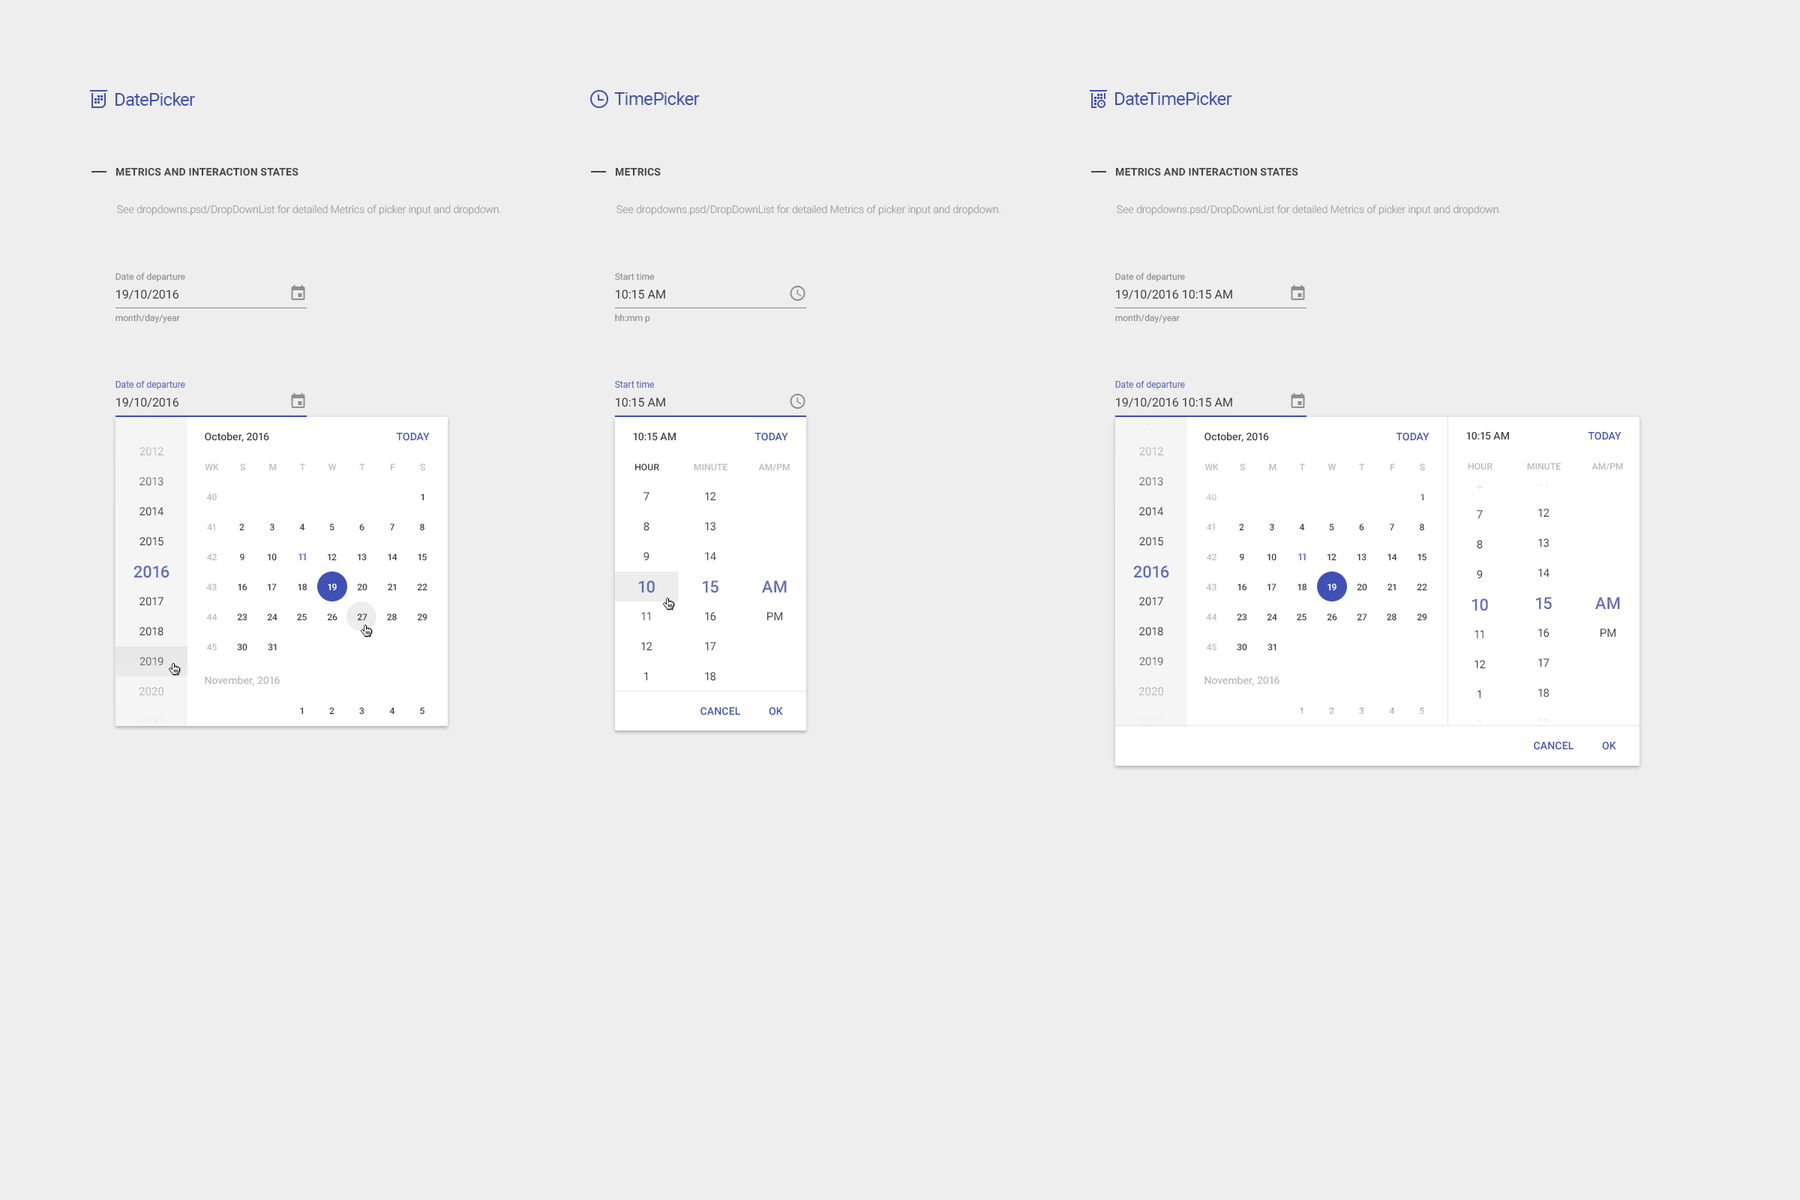
<style>
.page{position:relative;width:1800px;height:1200px;background:#eeeeee}
.page>*{position:absolute;margin:0}
.t1{font:18px "Roboto-Regular";letter-spacing:-0.025em;color:#3f51b5}
.t2{font:10.5px "Roboto-Bold";letter-spacing:0.01em;color:#454545;text-transform:uppercase}
.t3{font:10.5px "Roboto-Light";color:#a1a1a1}
.t4{font:9px "Roboto-Regular";color:#8f8f8f}
.t5{font:12px "Roboto-Regular";color:#3b3b3b}
.t6{font:9px "Roboto-Regular";color:#606cbd}
.t7{font:11.2px/30px "Roboto-Regular";letter-spacing:0.01em}
.t8{font:16.5px/32.2px "Roboto-Medium";letter-spacing:0.01em}
.t9{font:11.2px/27.8px "Roboto-Regular";letter-spacing:0.01em}
.t10{font:10.5px "Roboto-Medium";color:#404040}
.t11{font:10.5px "Roboto-Medium";letter-spacing:0.01em;color:#3f51b5}
.t12{font:9px "Roboto-Medium";color:#bbbbbb}
.t13{font:9px "Roboto-Medium";letter-spacing:0.01em;color:#bbbbbb}
.t14{font:9px "Roboto-Medium";letter-spacing:0.01em}
.t15{font:9px "Roboto-Medium";letter-spacing:0.01em;color:#404040}
.t16{font:9px/30px "Roboto-Medium";color:#bbbbbb}
.t17{font:9px "Roboto-Medium";color:#404040}
.t18{font:9px "Roboto-Medium"}
.t19{font:9px "Roboto-Medium";color:#3f51b5}
.t20{font:16.5px/32.2px "Roboto-Medium";letter-spacing:0.01em;color:#6370c0}
.t21{font:11.2px/27.8px "Roboto-Regular";letter-spacing:0.01em;color:#6370c0}
.t22{font:9px "Roboto-Medium";color:#ffffff}
.t23{font:9px "Roboto-Medium";color:#3b3b3b}
.t24{font:10.5px "Roboto-Medium";color:#bbbbbb}
.t25{font:10.5px "Roboto-Medium";letter-spacing:0.01em;color:#3f51b5;text-transform:uppercase}
.t26{font:9px "Roboto-Medium";color:#aeaeae}
.t27{font:9px "Roboto-Medium";color:#c2c2c2}
.t28{font:9px "Roboto-Medium";color:#bababa}
.t29{font:9px "Roboto-Medium";color:#b8b8b8}
</style>
<div class="page">
<p class="t1" style="left:116px;top:92px;width:79px;height:14px">DatePicker</p>
<p class="t1" style="left:614px;top:92px;width:86px;height:13px">TimePicker</p>
<p class="t1" style="left:1115px;top:92px;width:117px;height:13px">DateTimePicker</p>
<p class="t2" style="left:116px;top:167px;width:182px;height:9px">Metrics and Interaction States</p>
<p class="t2" style="left:615px;top:167px;width:46px;height:9px">Metrics</p>
<p class="t2" style="left:1115px;top:167px;width:183px;height:9px">Metrics and Interaction States</p>
<p class="t3" style="left:117px;top:205px;width:384px;height:10px">See dropdowns.psd/DropDownList for detailed Metrics of picker input and dropdown.</p>
<p class="t3" style="left:616px;top:205px;width:384px;height:10px">See dropdowns.psd/DropDownList for detailed Metrics of picker input and dropdown.</p>
<p class="t3" style="left:1117px;top:205px;width:384px;height:10px">See dropdowns.psd/DropDownList for detailed Metrics of picker input and dropdown.</p>
<p class="t4" style="left:116px;top:272px;width:69px;height:10px">Date of departure</p>
<p class="t4" style="left:615px;top:273px;width:40px;height:7px">Start time</p>
<p class="t4" style="left:1115px;top:272px;width:70px;height:10px">Date of departure</p>
<p class="t5" style="left:116px;top:290px;width:63px;height:10px">19/10/2016</p>
<p class="t5" style="left:615px;top:290px;width:50px;height:9px">10:15 АМ</p>
<p class="t5" style="left:1115px;top:290px;width:117px;height:10px">19/10/2016 10:15 АМ</p>
<p class="t4" style="left:116px;top:314px;width:64px;height:9px">month/day/year</p>
<p class="t4" style="left:615px;top:314px;width:35px;height:9px">hh:mm p</p>
<p class="t4" style="left:1115px;top:314px;width:65px;height:9px">month/day/year</p>
<p class="t6" style="left:116px;top:381px;width:69px;height:8px">Date of departure</p>
<p class="t6" style="left:615px;top:381px;width:39px;height:7px">Start time</p>
<p class="t6" style="left:1115px;top:381px;width:70px;height:8px">Date of departure</p>
<p class="t5" style="left:116px;top:398px;width:63px;height:10px">19/10/2016</p>
<p class="t5" style="left:615px;top:398px;width:50px;height:9px">10:15 АМ</p>
<p class="t5" style="left:1115px;top:398px;width:117px;height:10px">19/10/2016 10:15 АМ</p>
<p class="t7" style="left:134px;top:417px;width:36px;height:309px;text-align:center">2011<br>2012<br>2013<br>2014<br>2015<br><span class="t8">2016<br></span><span class="t9">2017<br></span>2018<br>2019<br>2020<br>2021</p>
<p class="t7" style="left:1133px;top:417px;width:36px;height:309px;text-align:center">2011<br>2012<br>2013<br>2014<br>2015<br><span class="t8">2016<br></span><span class="t9">2017<br></span>2018<br>2019<br>2020<br>2021</p>
<p class="t10" style="left:205px;top:432px;width:64px;height:10px">October, 2016</p>
<p class="t11" style="left:396px;top:433px;width:34px;height:8px">TODAY</p>
<p class="t10" style="left:633px;top:433px;width:43px;height:8px">10:15 AM</p>
<p class="t11" style="left:754px;top:433px;width:34px;height:8px">TODAY</p>
<p class="t10" style="left:1204px;top:432px;width:65px;height:10px">October, 2016</p>
<p class="t11" style="left:1396px;top:433px;width:34px;height:8px">TODAY</p>
<p class="t10" style="left:1466px;top:432px;width:43px;height:8px">10:15 AM</p>
<p class="t11" style="left:1588px;top:432px;width:34px;height:8px">TODAY</p>
<p class="t12" style="left:205px;top:464px;width:14px;height:6px">WK</p>
<p class="t13" style="left:240px;top:464px;width:5px;height:7px">S</p>
<p class="t13" style="left:269px;top:464px;width:8px;height:7px">M</p>
<p class="t13" style="left:300px;top:464px;width:5px;height:7px">T</p>
<p class="t13" style="left:328px;top:464px;width:8px;height:7px">W</p>
<p class="t14" style="left:359px;top:464px;width:6px;height:6px">T</p>
<p class="t13" style="left:390px;top:464px;width:5px;height:7px">F</p>
<p class="t13" style="left:420px;top:464px;width:5px;height:7px">S</p>
<p class="t15" style="left:634px;top:464px;width:25px;height:7px">HOUR</p>
<p class="t13" style="left:694px;top:464px;width:34px;height:7px">MINUTE</p>
<p class="t13" style="left:758px;top:464px;width:32px;height:7px">AM/PM</p>
<p class="t12" style="left:1204px;top:464px;width:15px;height:6px">WK</p>
<p class="t13" style="left:1240px;top:464px;width:5px;height:7px">S</p>
<p class="t13" style="left:1269px;top:464px;width:7px;height:7px">M</p>
<p class="t13" style="left:1300px;top:464px;width:5px;height:7px">T</p>
<p class="t13" style="left:1328px;top:464px;width:8px;height:7px">W</p>
<p class="t14" style="left:1359px;top:464px;width:6px;height:6px">T</p>
<p class="t13" style="left:1390px;top:464px;width:5px;height:7px">F</p>
<p class="t13" style="left:1420px;top:464px;width:5px;height:7px">S</p>
<p class="t13" style="left:1468px;top:463px;width:24px;height:7px">HOUR</p>
<p class="t13" style="left:1527px;top:463px;width:34px;height:7px">MINUTE</p>
<p class="t13" style="left:1592px;top:463px;width:31px;height:7px">AM/PM</p>
<p class="t7" style="left:1472px;top:480px;width:16px;height:248px;text-align:center">6<br>7<br>8<br>9<br><span class="t8">10<br></span><span class="t9">11<br></span>12<br>1<br>2</p>
<p class="t7" style="left:1536px;top:478px;width:16px;height:249px;text-align:center">11<br>12<br>13<br>14<br><span class="t8">15<br></span><span class="t9">16<br></span>17<br>18<br>19</p>
<p class="t16" style="left:206px;top:494px;width:12px;height:156px;text-align:center">40<br>41<br>42<br>43<br>44<br>45</p>
<p class="t17" style="left:421px;top:494px;width:3px;height:7px">1</p>
<p class="t7" style="left:638px;top:492px;width:17px;height:188px;text-align:center">7<br>8<br>9<br><span class="t8">10<br></span><span class="t9">11<br></span>12<br>1</p>
<p class="t7" style="left:703px;top:492px;width:15px;height:189px;text-align:center">12<br>13<br>14<br><span class="t8">15<br></span><span class="t9">16<br></span>17<br>18</p>
<p class="t16" style="left:1206px;top:494px;width:11px;height:156px;text-align:center">40<br>41<br>42<br>43<br>44<br>45</p>
<p class="t18" style="left:1420px;top:494px;width:4px;height:7px">1</p>
<p class="t17" style="left:239px;top:524px;width:5px;height:7px">2</p>
<p class="t17" style="left:270px;top:524px;width:4px;height:7px">3</p>
<p class="t17" style="left:299px;top:524px;width:6px;height:7px">4</p>
<p class="t17" style="left:329px;top:524px;width:5px;height:7px">5</p>
<p class="t17" style="left:359px;top:524px;width:5px;height:7px">6</p>
<p class="t17" style="left:390px;top:524px;width:4px;height:7px">7</p>
<p class="t17" style="left:420px;top:524px;width:4px;height:7px">8</p>
<p class="t17" style="left:1239px;top:524px;width:5px;height:7px">2</p>
<p class="t17" style="left:1270px;top:524px;width:4px;height:7px">3</p>
<p class="t17" style="left:1299px;top:524px;width:6px;height:7px">4</p>
<p class="t17" style="left:1329px;top:524px;width:5px;height:7px">5</p>
<p class="t17" style="left:1359px;top:524px;width:5px;height:7px">6</p>
<p class="t17" style="left:1390px;top:524px;width:4px;height:7px">7</p>
<p class="t17" style="left:1420px;top:524px;width:4px;height:7px">8</p>
<p class="t17" style="left:239px;top:554px;width:5px;height:6px">9</p>
<p class="t17" style="left:268px;top:554px;width:9px;height:7px">10</p>
<p class="t19" style="left:298px;top:554px;width:8px;height:6px">11</p>
<p class="t17" style="left:328px;top:554px;width:9px;height:7px">12</p>
<p class="t17" style="left:358px;top:554px;width:9px;height:7px">13</p>
<p class="t17" style="left:388px;top:554px;width:10px;height:7px">14</p>
<p class="t17" style="left:418px;top:554px;width:9px;height:7px">15</p>
<p class="t17" style="left:1239px;top:554px;width:5px;height:6px">9</p>
<p class="t17" style="left:1268px;top:554px;width:8px;height:7px">10</p>
<p class="t19" style="left:1298px;top:554px;width:8px;height:6px">11</p>
<p class="t17" style="left:1328px;top:554px;width:8px;height:7px">12</p>
<p class="t17" style="left:1358px;top:554px;width:8px;height:7px">13</p>
<p class="t17" style="left:1388px;top:554px;width:9px;height:7px">14</p>
<p class="t17" style="left:1418px;top:554px;width:8px;height:7px">15</p>
<p class="t20" style="left:762px;top:580px;width:25px;height:40px;text-align:center">AM<br><span class="t21">PM</span></p>
<p class="t17" style="left:238px;top:584px;width:10px;height:7px">16</p>
<p class="t17" style="left:268px;top:584px;width:9px;height:7px">17</p>
<p class="t17" style="left:298px;top:584px;width:10px;height:7px">18</p>
<p class="t22" style="left:328px;top:584px;width:9px;height:7px">19</p>
<p class="t17" style="left:357px;top:584px;width:11px;height:7px">20</p>
<p class="t17" style="left:388px;top:584px;width:8px;height:7px">21</p>
<p class="t17" style="left:417px;top:584px;width:11px;height:7px">22</p>
<p class="t17" style="left:1238px;top:584px;width:9px;height:7px">16</p>
<p class="t17" style="left:1268px;top:584px;width:8px;height:7px">17</p>
<p class="t17" style="left:1298px;top:584px;width:9px;height:7px">18</p>
<p class="t22" style="left:1328px;top:584px;width:8px;height:7px">19</p>
<p class="t17" style="left:1357px;top:584px;width:10px;height:7px">20</p>
<p class="t17" style="left:1388px;top:584px;width:8px;height:7px">21</p>
<p class="t17" style="left:1417px;top:584px;width:10px;height:7px">22</p>
<p class="t20" style="left:1595px;top:597px;width:25px;height:40px;text-align:center">AM<br><span class="t21">PM</span></p>
<p class="t17" style="left:237px;top:614px;width:11px;height:7px">23</p>
<p class="t17" style="left:267px;top:614px;width:11px;height:7px">24</p>
<p class="t17" style="left:297px;top:614px;width:10px;height:7px">25</p>
<p class="t17" style="left:327px;top:614px;width:11px;height:7px">26</p>
<p class="t23" style="left:357px;top:614px;width:11px;height:7px">27</p>
<p class="t17" style="left:387px;top:614px;width:10px;height:7px">28</p>
<p class="t17" style="left:417px;top:614px;width:11px;height:7px">29</p>
<p class="t17" style="left:1237px;top:614px;width:10px;height:7px">23</p>
<p class="t17" style="left:1267px;top:614px;width:10px;height:7px">24</p>
<p class="t17" style="left:1297px;top:614px;width:9px;height:7px">25</p>
<p class="t17" style="left:1327px;top:614px;width:10px;height:7px">26</p>
<p class="t17" style="left:1357px;top:614px;width:10px;height:7px">27</p>
<p class="t17" style="left:1387px;top:614px;width:9px;height:7px">28</p>
<p class="t17" style="left:1417px;top:614px;width:10px;height:7px">29</p>
<p class="t17" style="left:237px;top:644px;width:11px;height:7px">30</p>
<p class="t17" style="left:268px;top:644px;width:9px;height:7px">31</p>
<p class="t17" style="left:1237px;top:644px;width:10px;height:7px">30</p>
<p class="t17" style="left:1268px;top:644px;width:8px;height:7px">31</p>
<p class="t24" style="left:205px;top:676px;width:75px;height:10px">November, 2016</p>
<p class="t24" style="left:1204px;top:676px;width:76px;height:10px">November, 2016</p>
<p class="t17" style="left:300px;top:707px;width:4px;height:8px">1</p>
<p class="t17" style="left:329px;top:707px;width:5px;height:8px">2</p>
<p class="t17" style="left:359px;top:707px;width:5px;height:8px">3</p>
<p class="t17" style="left:389px;top:707px;width:6px;height:8px">4</p>
<p class="t17" style="left:420px;top:707px;width:4px;height:8px">5</p>
<p class="t25" style="left:700px;top:707px;width:40px;height:9px">CANCEL</p>
<p class="t25" style="left:769px;top:707px;width:14px;height:9px">OK</p>
<p class="t26" style="left:1300px;top:707px;width:4px;height:8px">1</p>
<p class="t27" style="left:1329px;top:707px;width:5px;height:8px">2</p>
<p class="t28" style="left:1359px;top:707px;width:5px;height:8px">3</p>
<p class="t29" style="left:1389px;top:707px;width:6px;height:8px">4</p>
<p class="t18" style="left:1420px;top:707px;width:4px;height:8px">5</p>
<p class="t25" style="left:1534px;top:742px;width:40px;height:8px">CANCEL</p>
<p class="t25" style="left:1602px;top:742px;width:14px;height:8px">OK</p>
</div>
